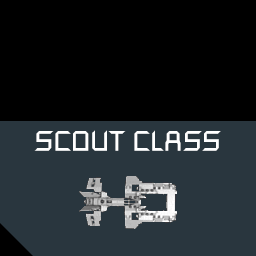
<style>
.page{position:relative;width:256px;height:256px;background:#000000}
.page>*{position:absolute;margin:0}
.t1{font:28px "SpaceEngineers";color:#ffffff}
</style>
<div class="page">
<p class="t1" style="left:34px;top:130px;width:187px;height:21px">SCOUT CLASS</p>
</div>
